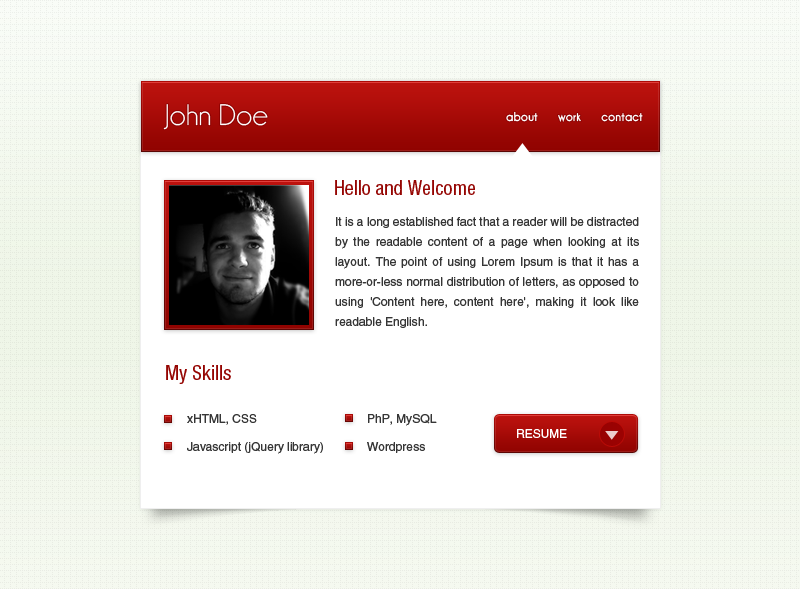
<style>
.page{position:relative;width:800px;height:589px;background:#ffffff}
.page>*{position:absolute;margin:0}
.t1{font:30px "Champagne&Limousines";color:#ffffff}
.t2{font:13px "Champagne&LimousinesThick";letter-spacing:0.01em;color:#ffffff}
.t3{font:20px "HelveticaNeueLTStd-Cn";color:#950502}
.t4{font:12px/20px "HelveticaLTStd-Roman";color:#363636}
.t5{font:12px/35px "HelveticaLTStd-Roman";color:#363636}
.t6{font:12px "HelveticaLTStd-Roman";color:#ffffff}
</style>
<div class="page">
<p class="t1" style="left:163px;top:104px;width:105px;height:26px">John Doe</p>
<p class="t2" style="left:506px;top:111px;width:137px;height:11px">about      work      contact</p>
<p class="t3" style="left:335px;top:180px;width:140px;height:15px">Hello and Welcome</p>
<p class="t4" style="left:335px;top:217px;width:304px;height:111px;text-align:justify">It is a long established fact that a reader will be distracted by the readable content of a page when looking at its layout. The point of using Lorem Ipsum is that it has a more-or-less normal distribution of letters, as opposed to using 'Content here, content here', making it look like readable English.</p>
<p class="t3" style="left:166px;top:365px;width:65px;height:19px">My Skills</p>
<p class="t5" style="left:187px;top:414px;width:250px;height:40px;text-align:justify">xHTML, CSS    PhP, MySQL<br>Javascript (jQuery library)  Wordpress</p>
<p class="t6" style="left:517px;top:429px;width:50px;height:9px">RESUME</p>
</div>
